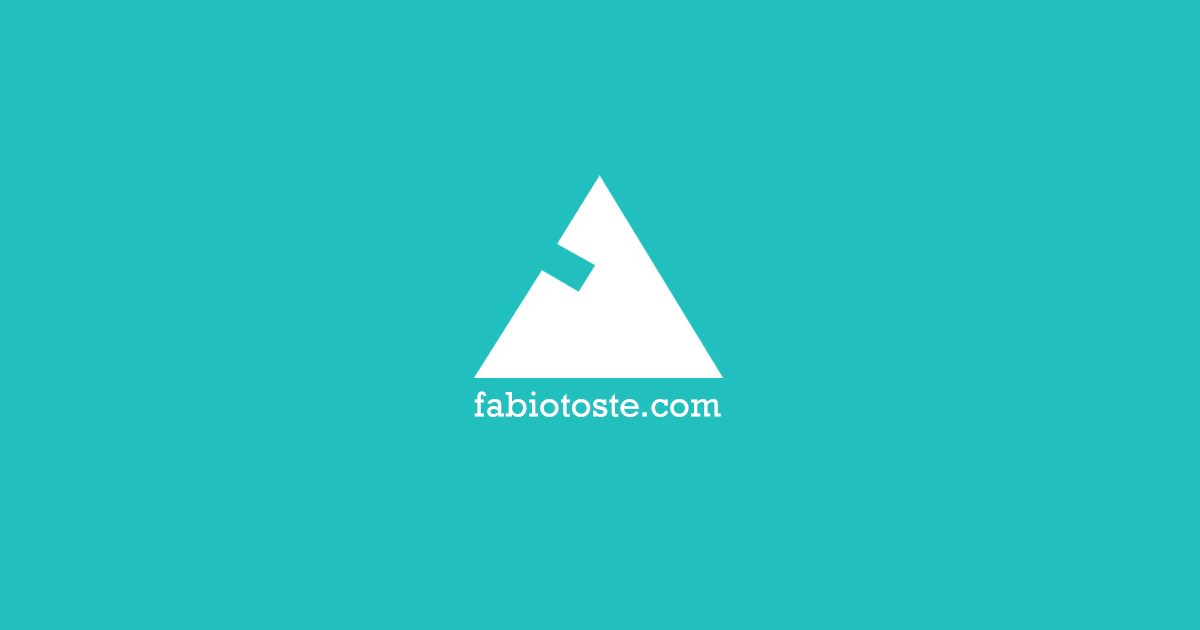
<style>
.page{position:relative;width:1200px;height:630px;background:#22bfbf}
.page>*{position:absolute;margin:0}
.t1{font:36px "Rockwell";letter-spacing:0.005em;color:#ffffff}
</style>
<div class="page">
<p class="t1" style="left:474px;top:391px;width:247px;height:26px">fabiotoste.com</p>
</div>
